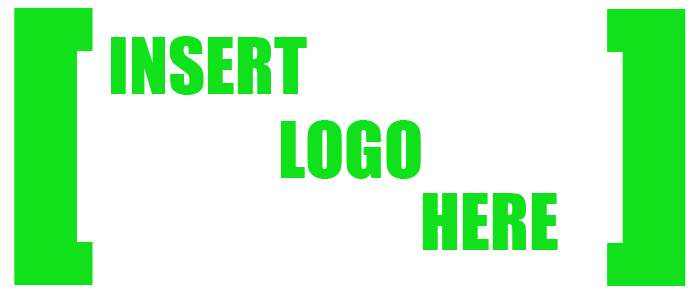
<style>
.page{position:relative;width:700px;height:300px;background:#ffffff}
.page>*{position:absolute;margin:0}
.t1{font:350px "Impact";color:#11e11b}
.t2{font:72px "Impact";color:#11e11b}
</style>
<div class="page">
<p class="t1" style="left:14px;top:7px;width:79px;height:278px">]</p>
<p class="t1" style="left:607px;top:8px;width:79px;height:278px">[</p>
<p class="t2" style="left:111px;top:36px;width:196px;height:59px">INSERT</p>
<p class="t2" style="left:280px;top:120px;width:141px;height:59px">LOGO</p>
<p class="t2" style="left:422px;top:193px;width:136px;height:57px">HERE</p>
</div>
